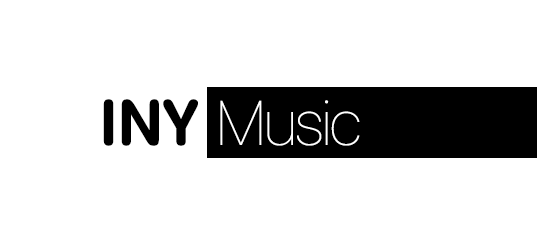
<style>
.page{position:relative;width:537px;height:240px;background:#ffffff}
.page>*{position:absolute;margin:0}
.t1{font:62.5px "SFUIDisplay-Ultralight";color:#ffffff}
.t2{font:62.5px "Swis721BdRndBTRusbyme-Bold";color:#000000}
</style>
<div class="page">
<p class="t1" style="left:103px;top:99px;width:257px;height:47px"><span class="t2">INY </span>Music</p>
</div>
